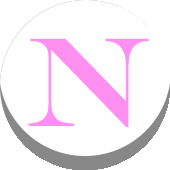
<style>
.page{position:relative;width:170px;height:170px;background:#ffffff}
.page>*{position:absolute;margin:0}
.t1{font:128px "EngraversMT";color:#ff8ff1}
</style>
<div class="page">
<p class="t1" style="left:28px;top:38px;width:121px;height:89px">N</p>
</div>
